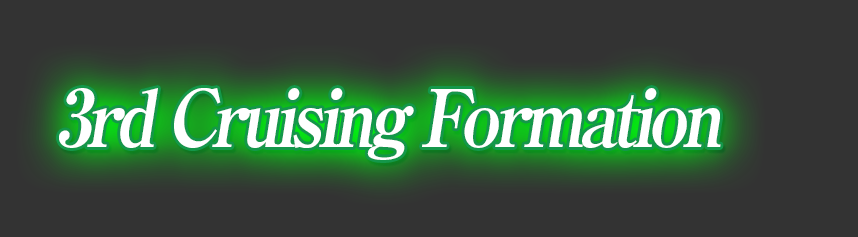
<style>
.page{position:relative;width:858px;height:237px;background:#333333}
.page>*{position:absolute;margin:0}
.t1{font:80px "RyuminPro-ExBold";letter-spacing:-0.08em;color:#ffffff;font-style:italic;scale:0.9 1}
</style>
<div class="page">
<p class="t1" style="left:59px;top:88px;width:662px;height:72px">3rd Cruising Formation</p>
</div>
